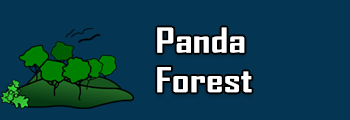
<style>
.page{position:relative;width:350px;height:120px;background:#043654}
.page>*{position:absolute;margin:0}
.t1{font:32.9px "AgencyFB-Bold";color:#ffffff;scale:1.33 1}
</style>
<div class="page">
<p class="t1" style="left:157px;top:27px;width:95px;height:66px">Panda <br>Forest</p>
</div>
